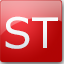
<style>
.page{position:relative;width:64px;height:64px}
.page>*{position:absolute;margin:0}
.t1{font:42px "Verdana";color:#f8fafc}
</style>
<div class="page">
<p class="t1" style="left:5px;top:16px;width:53px;height:33px">ST</p>
</div>
